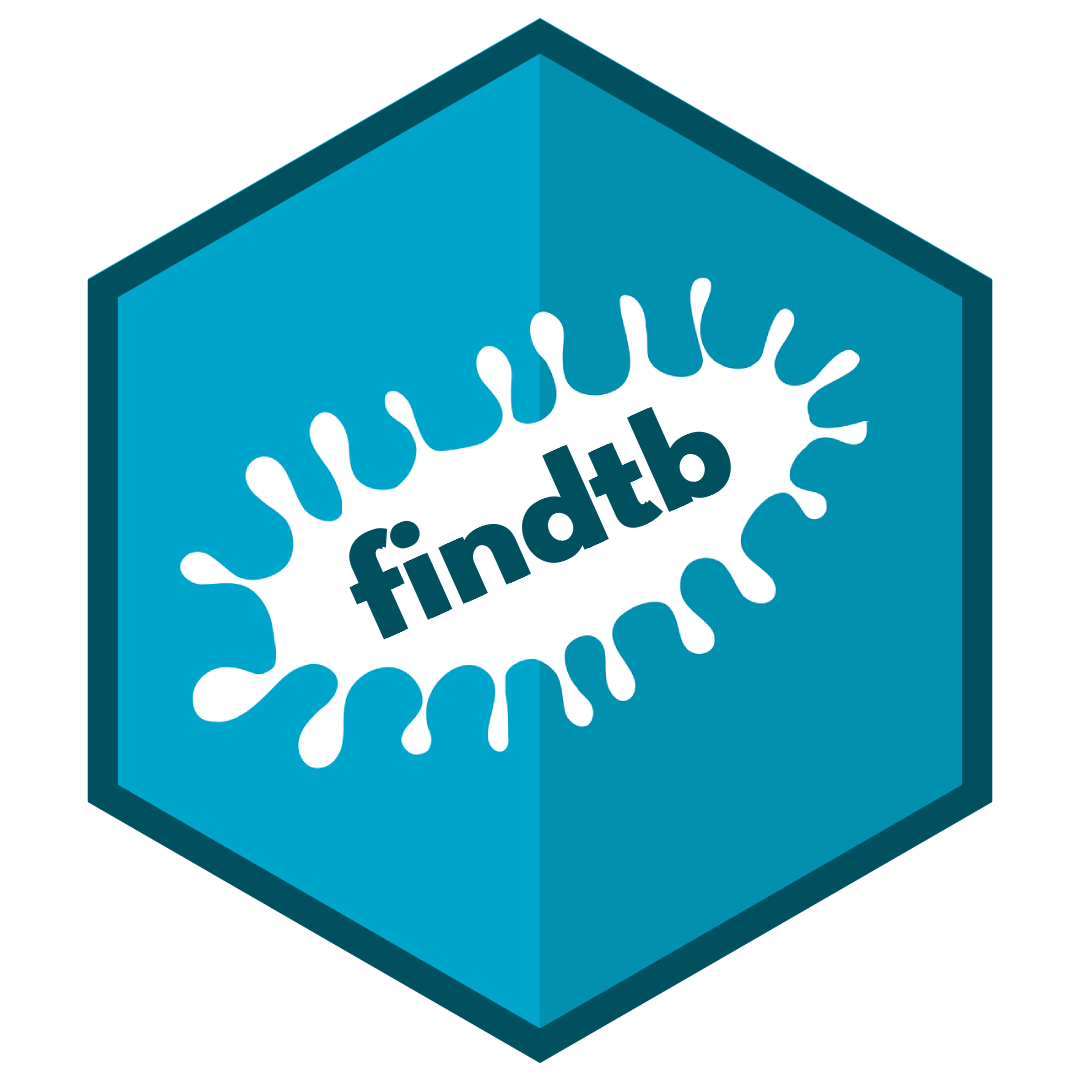
<style>
.page{position:relative;width:1080px;height:1080px;background:#ffffff}
.page>*{position:absolute;margin:0}
.t1{font:150px "LeagueSpartan-Bold";color:#01505f;font-weight:bold}
</style>
<div class="page">
<p class="t1" style="left:348px;top:406px;width:384px;height:234px;rotate:-24deg">findtb</p>
</div>
